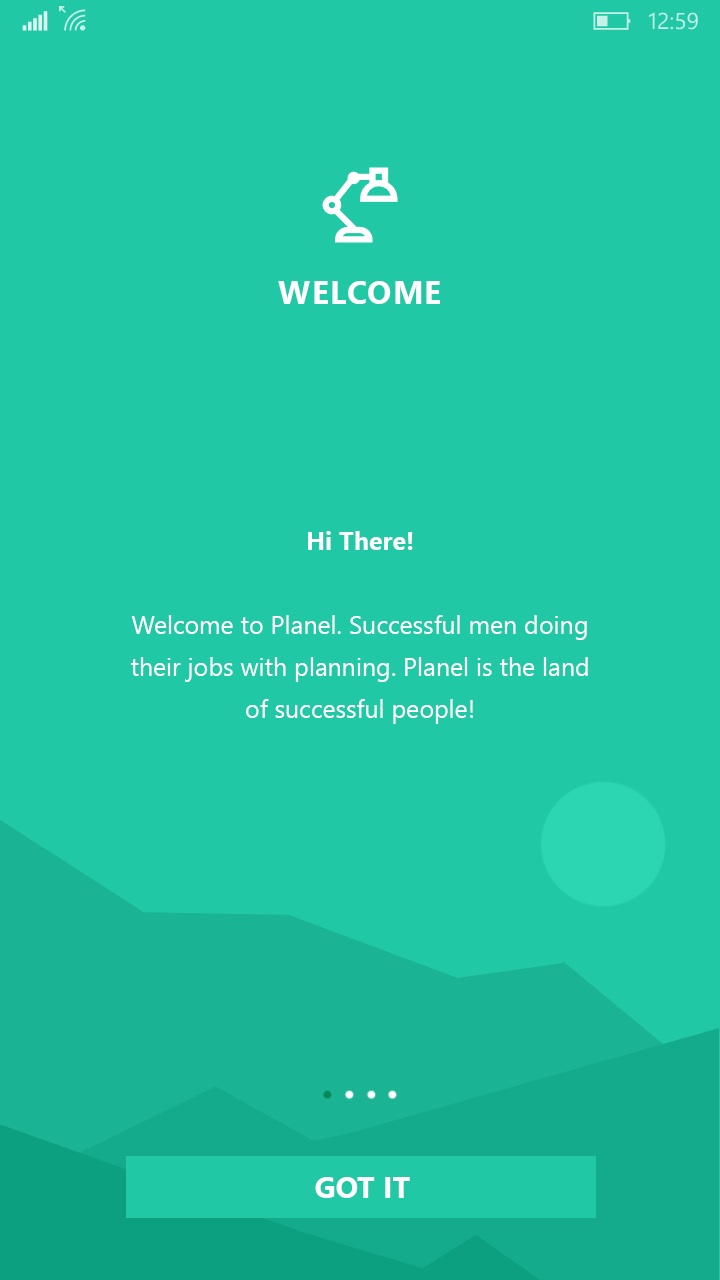
<style>
.page{position:relative;width:720px;height:1280px;background:#20c8a5}
.page>*{position:absolute;margin:0}
.t1{font:32px "SegoeUI-Bold";color:#ffffff;text-transform:uppercase}
.t2{font:25px/42px "SegoeUI";color:#ffffff}
.t3{font:25px/42px "SegoeUI-Bold";color:#ffffff}
.t4{font:30px "SegoeUI-Bold";color:#ffffff}
</style>
<div class="page">
<p class="t1" style="left:278px;top:281px;width:162px;height:23px">Welcome</p>
<p class="t2" style="left:130px;top:531px;width:458px;height:193px;text-align:center"><span class="t3">Hi There!<br></span><br>Welcome to Planel. Successful men doing their jobs with planning. Planel is the land of successful people!</p>
<p class="t4" style="left:315px;top:1177px;width:95px;height:21px">GOT IT</p>
</div>
